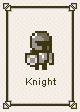
<style>
.page{position:relative;width:80px;height:112px;background:#f8f1eb}
.page>*{position:absolute;margin:0}
.t1{font:10px "ArialMT";color:#3e3612}
</style>
<div class="page">
<p class="t1" style="left:26px;top:78px;width:30px;height:9px">Knight</p>
</div>
